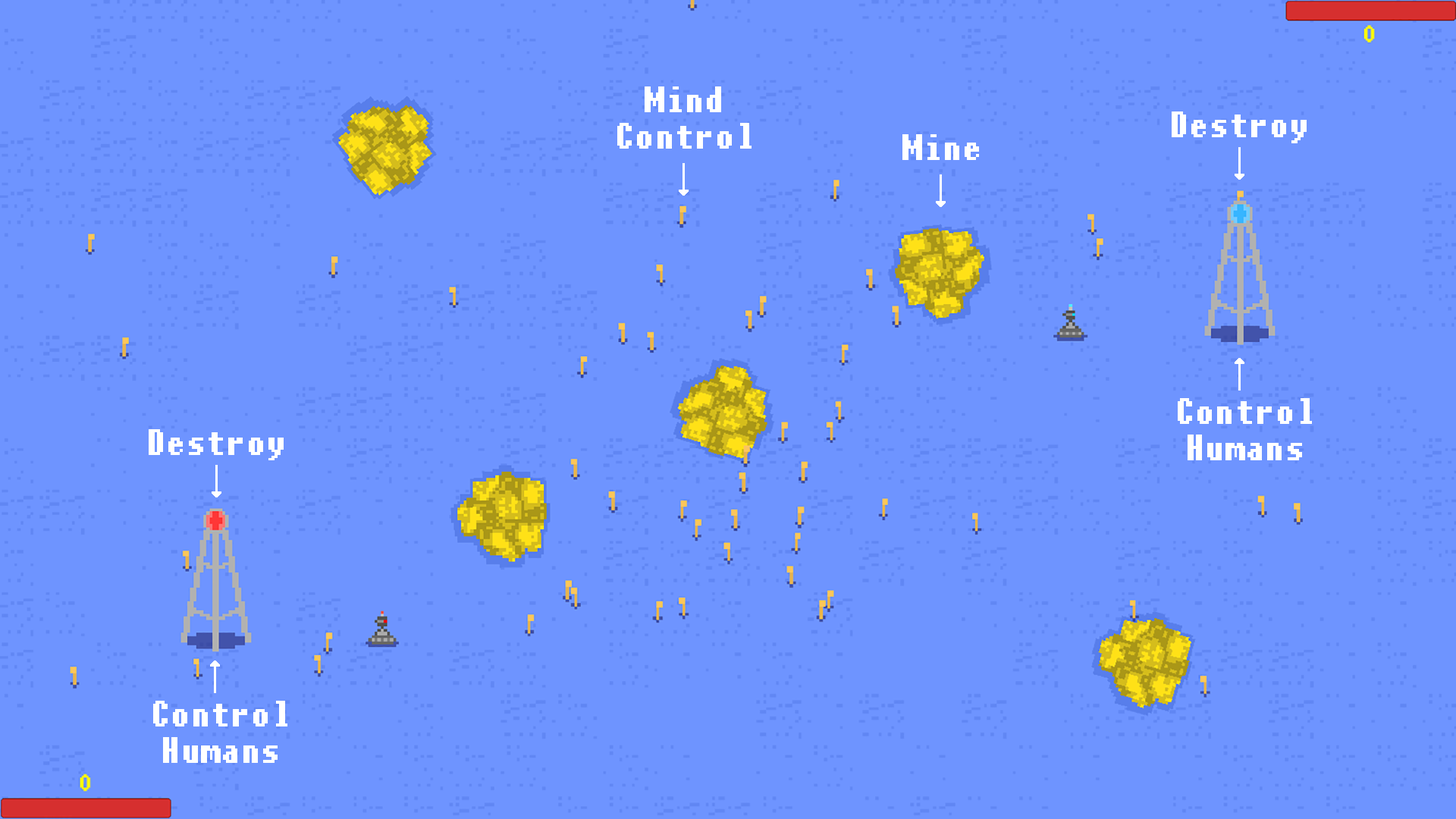
<style>
.page{position:relative;width:1456px;height:819px;background:#6e94ff}
.page>*{position:absolute;margin:0}
.t1{font:45.4px/36.4px "Charybdis";color:#ffffff}
.t2{font:45.4px "Charybdis";color:#ffffff}
.t3{font:45.5px "Charybdis";color:#ffffff}
</style>
<div class="page">
<p class="t1" style="left:617px;top:86px;width:134px;height:63px;text-align:center">Mind<br>Control</p>
<p class="t2" style="left:1172px;top:111px;width:135px;height:32px">Destroy</p>
<p class="t2" style="left:902px;top:134px;width:77px;height:26px">Mine</p>
<p class="t1" style="left:1178px;top:398px;width:134px;height:62px;text-align:center">Control<br>Humans</p>
<p class="t3" style="left:149px;top:429px;width:135px;height:31px">Destroy</p>
<p class="t1" style="left:153px;top:701px;width:134px;height:62px;text-align:center">Control<br>Humans</p>
</div>
